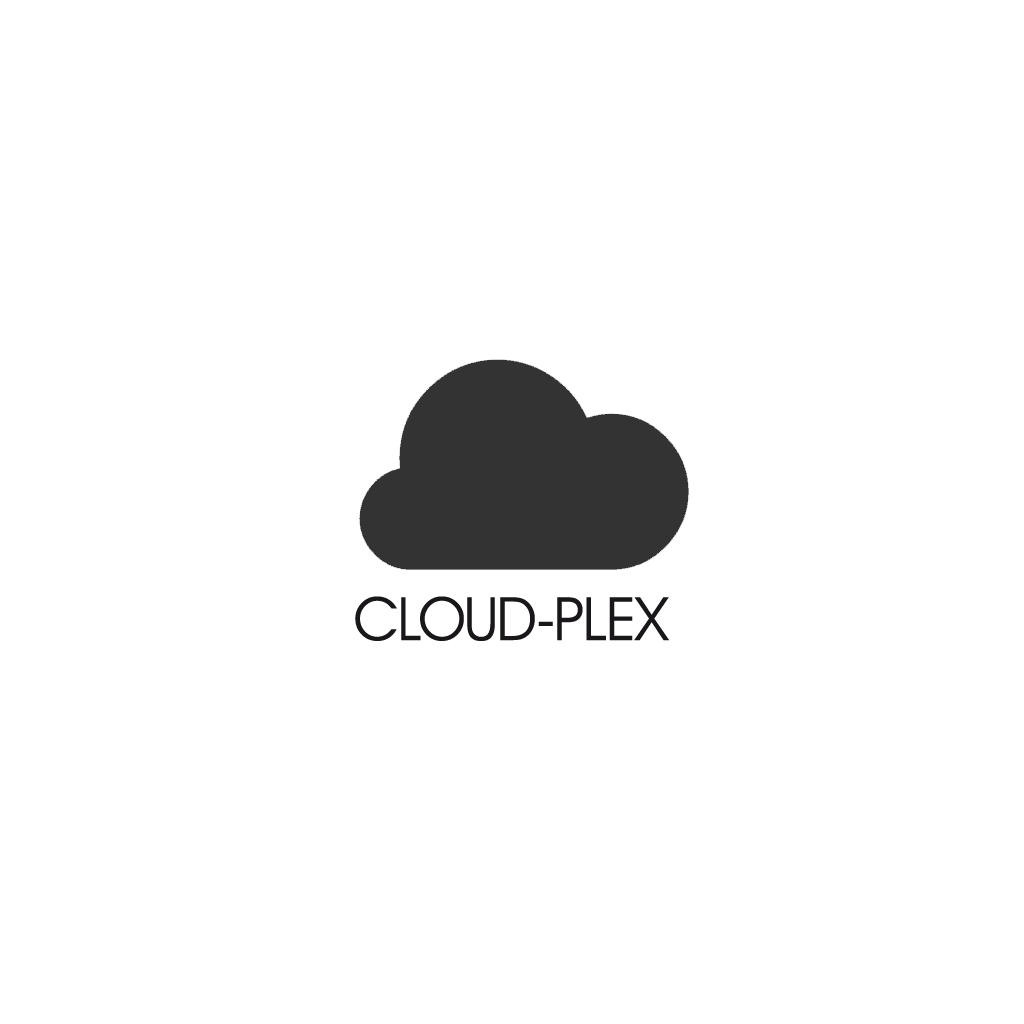
<style>
.page{position:relative;width:1024px;height:1024px;background:#ffffff}
.page>*{position:absolute;margin:0}
.t1{font:60px "AvantGardeITCbyBT-Book";letter-spacing:-0.025em;color:#1a171b}
</style>
<div class="page">
<p class="t1" style="left:355px;top:596px;width:314px;height:45px">CLOUD-PLEX</p>
</div>
